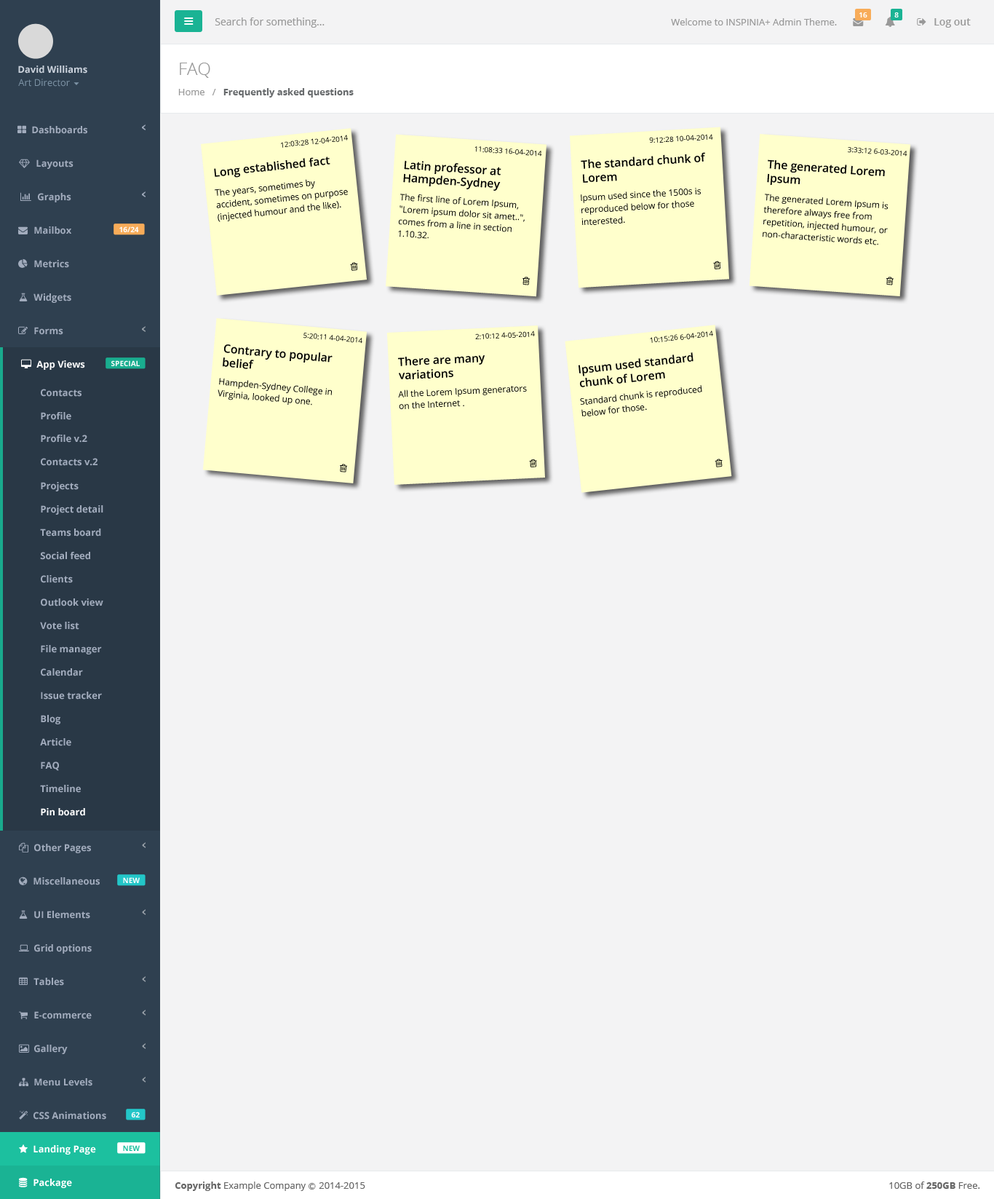
<style>
.page{position:relative;width:994px;height:1199px;background:#f3f3f4}
.page>*{position:absolute;margin:0}
.t1{font:10.2px "OpenSans";color:#999999}
.t2{font:7.3px "OpenSans-Semibold";color:#ffffff}
.t3{font:9.5px "OpenSans";color:#999999}
.t4{font:10.2px "OpenSans-Semibold";color:#999999}
.t5{font:9.5px "OpenSans-Bold";color:#cad1db}
.t6{font:17.5px "OpenSans-Light";color:#999999}
.t7{font:9.5px "OpenSans";color:#7d93a5}
.t8{font:9.5px "OpenSans-Bold";color:#676a6c}
.t9{font:9.5px "OpenSans-Bold";color:#a2acbd}
.t10{font:7.2px "OpenSans"}
.t11{font:7.2px "OpenSans";color:#000000}
.t12{font:11.4px "OpenSans-Semibold";color:#000000}
.t13{font:11.4px/13.1px "OpenSans-Semibold";color:#000000}
.t14{font:8.7px "OpenSans";color:#000000}
.t15{font:7.3px "OpenSans-Bold";color:#fefefe}
.t16{font:9.5px "OpenSans-Bold";color:#ffffff}
.t17{font:7.3px "OpenSans-Bold";color:#1cc09f}
.t18{font:9.5px "OpenSans";color:#666666}
.t19{font:9.5px "OpenSans-Bold";color:#666666}
.t20{font:7.3px "Meiryo";color:#666666}
</style>
<div class="page">
<p class="t1" style="left:215px;top:17px;width:110px;height:11px">Search for something...</p>
<p class="t2" style="left:860px;top:12px;width:8px;height:5px">16</p>
<p class="t2" style="left:895px;top:12px;width:4px;height:5px">8</p>
<p class="t3" style="left:671px;top:18px;width:166px;height:7px">Welcome to INSPINIA+ Admin Theme.</p>
<p class="t4" style="left:935px;top:18px;width:36px;height:10px">Log out</p>
<p class="t5" style="left:18px;top:66px;width:69px;height:8px">David Williams</p>
<p class="t6" style="left:180px;top:63px;width:30px;height:15px">FAQ</p>
<p class="t7" style="left:18px;top:79px;width:52px;height:8px">Art Director</p>
<p class="t8" style="left:178px;top:88px;width:176px;height:10px"><span class="t3">Home   /   </span>Frequently asked questions</p>
<p class="t9" style="left:32px;top:126px;width:55px;height:8px">Dashboards</p>
<p class="t10" style="left:281px;top:135px;width:67px;height:13px;rotate:-6deg">12:03:28 12-04-2014</p>
<p class="t11" style="left:649px;top:134px;width:64px;height:9px;rotate:-3deg">9:12:28 10-04-2014</p>
<p class="t11" style="left:475px;top:146px;width:67px;height:11px;rotate:4deg">11:08:33 16-04-2014</p>
<p class="t11" style="left:848px;top:147px;width:60px;height:10px;rotate:4deg">3:33:12 6-03-2014</p>
<p class="t9" style="left:36px;top:159px;width:38px;height:10px">Layouts</p>
<p class="t12" style="left:214px;top:157px;width:117px;height:21px;rotate:-6deg">Long established fact</p>
<p class="t13" style="left:403px;top:160px;width:99px;height:31px;rotate:4deg">Latin professor at<br>Hampden-Sydney</p>
<p class="t12" style="left:581px;top:152px;width:124px;height:31px;rotate:-3deg">The standard chunk of <br>Lorem</p>
<p class="t12" style="left:767px;top:159px;width:118px;height:26px;rotate:4deg">The generated Lorem<br>Ipsum</p>
<p class="t14" style="left:215px;top:179px;width:133px;height:43px;rotate:-6deg">The years, sometimes by accident, sometimes on purpose (injected humour and the like).</p>
<p class="t9" style="left:38px;top:193px;width:33px;height:9px">Graphs</p>
<p class="t14" style="left:398px;top:194px;width:127px;height:45px;rotate:4deg">The first line of Lorem Ipsum, "Lorem ipsum dolor sit amet..", comes from a line in section 1.10.32.</p>
<p class="t14" style="left:581px;top:188px;width:120px;height:37px;rotate:-3deg">Ipsum used since the 1500s is reproduced below for those interested.</p>
<p class="t14" style="left:763px;top:194px;width:126px;height:51px;rotate:4deg">The generated Lorem Ipsum is therefore always free from repetition, injected humour, or non-characteristic words etc.</p>
<p class="t9" style="left:34px;top:226px;width:37px;height:8px">Mailbox</p>
<p class="t15" style="left:119px;top:226px;width:20px;height:6px">16/24</p>
<p class="t9" style="left:34px;top:260px;width:35px;height:8px">Metrics</p>
<p class="t9" style="left:33px;top:293px;width:38px;height:10px">Widgets</p>
<p class="t9" style="left:34px;top:327px;width:29px;height:8px">Forms</p>
<p class="t11" style="left:304px;top:333px;width:59px;height:11px;rotate:5deg">5:20:11 4-04-2014</p>
<p class="t11" style="left:475px;top:331px;width:60px;height:8px;rotate:-3deg">2:10:12 4-05-2014</p>
<p class="t11" style="left:650px;top:331px;width:63px;height:12px;rotate:-6deg">10:15:26 6-04-2014</p>
<p class="t12" style="left:223px;top:344px;width:110px;height:25px;rotate:5deg">Contrary to popular<br>belief</p>
<p class="t12" style="left:579px;top:352px;width:115px;height:35px;rotate:-6deg">Ipsum used standard<br>chunk of Lorem</p>
<p class="t16" style="left:36px;top:360px;width:49px;height:10px">App Views</p>
<p class="t15" style="left:111px;top:360px;width:29px;height:6px">SPECIAL</p>
<p class="t12" style="left:398px;top:355px;width:87px;height:24px;rotate:-3deg">There are many<br>variations</p>
<p class="t14" style="left:218px;top:378px;width:114px;height:28px;rotate:5deg">Hampden-Sydney College in Virginia, looked up one.</p>
<p class="t9" style="left:41px;top:389px;width:41px;height:8px">Contacts</p>
<p class="t14" style="left:398px;top:386px;width:129px;height:23px;rotate:-3deg">All the Lorem Ipsum generators on the Internet .</p>
<p class="t14" style="left:580px;top:385px;width:123px;height:31px;rotate:-6deg">Standard chunk is reproduced below for those.</p>
<p class="t9" style="left:41px;top:412px;width:30px;height:8px">Profile</p>
<p class="t9" style="left:41px;top:435px;width:46px;height:8px">Profile v.2</p>
<p class="t9" style="left:41px;top:458px;width:57px;height:8px">Contacts v.2</p>
<p class="t9" style="left:41px;top:482px;width:38px;height:9px">Projects</p>
<p class="t9" style="left:41px;top:505px;width:62px;height:10px">Project detail</p>
<p class="t9" style="left:40px;top:529px;width:61px;height:8px">Teams board</p>
<p class="t9" style="left:40px;top:552px;width:50px;height:8px">Social feed</p>
<p class="t9" style="left:41px;top:575px;width:32px;height:8px">Clients</p>
<p class="t9" style="left:41px;top:598px;width:62px;height:8px">Outlook view</p>
<p class="t9" style="left:40px;top:622px;width:39px;height:8px">Vote list</p>
<p class="t9" style="left:41px;top:645px;width:61px;height:9px">File manager</p>
<p class="t9" style="left:41px;top:668px;width:42px;height:8px">Calendar</p>
<p class="t9" style="left:41px;top:692px;width:61px;height:8px">Issue tracker</p>
<p class="t9" style="left:41px;top:715px;width:19px;height:9px">Blog</p>
<p class="t9" style="left:40px;top:738px;width:31px;height:8px">Article</p>
<p class="t9" style="left:41px;top:762px;width:18px;height:9px">FAQ</p>
<p class="t9" style="left:40px;top:785px;width:41px;height:8px">Timeline</p>
<p class="t16" style="left:41px;top:808px;width:44px;height:8px">Pin board</p>
<p class="t9" style="left:34px;top:844px;width:57px;height:9px">Other Pages</p>
<p class="t9" style="left:33px;top:877px;width:67px;height:8px">Miscellaneous</p>
<p class="t15" style="left:123px;top:877px;width:17px;height:6px">NEW</p>
<p class="t9" style="left:34px;top:911px;width:56px;height:8px">UI Elements</p>
<p class="t9" style="left:34px;top:944px;width:58px;height:10px">Grid options</p>
<p class="t9" style="left:33px;top:978px;width:31px;height:8px">Tables</p>
<p class="t9" style="left:34px;top:1011px;width:58px;height:8px">E-commerce</p>
<p class="t9" style="left:34px;top:1045px;width:34px;height:9px">Gallery</p>
<p class="t9" style="left:34px;top:1078px;width:58px;height:8px">Menu Levels</p>
<p class="t9" style="left:33px;top:1112px;width:73px;height:8px">CSS Animations</p>
<p class="t15" style="left:131px;top:1112px;width:9px;height:6px">62</p>
<p class="t16" style="left:33px;top:1145px;width:63px;height:10px">Landing Page</p>
<p class="t17" style="left:123px;top:1145px;width:17px;height:6px">NEW</p>
<p class="t16" style="left:33px;top:1179px;width:39px;height:9px">Package</p>
<p class="t18" style="left:175px;top:1182px;width:190px;height:9px"><span class="t19">Copyright</span> Example Company <span class="t20">Ⓒ </span>2014-2015</p>
<p class="t18" style="left:890px;top:1182px;width:91px;height:7px">10GB of <span class="t19">250GB</span> Free.</p>
</div>
